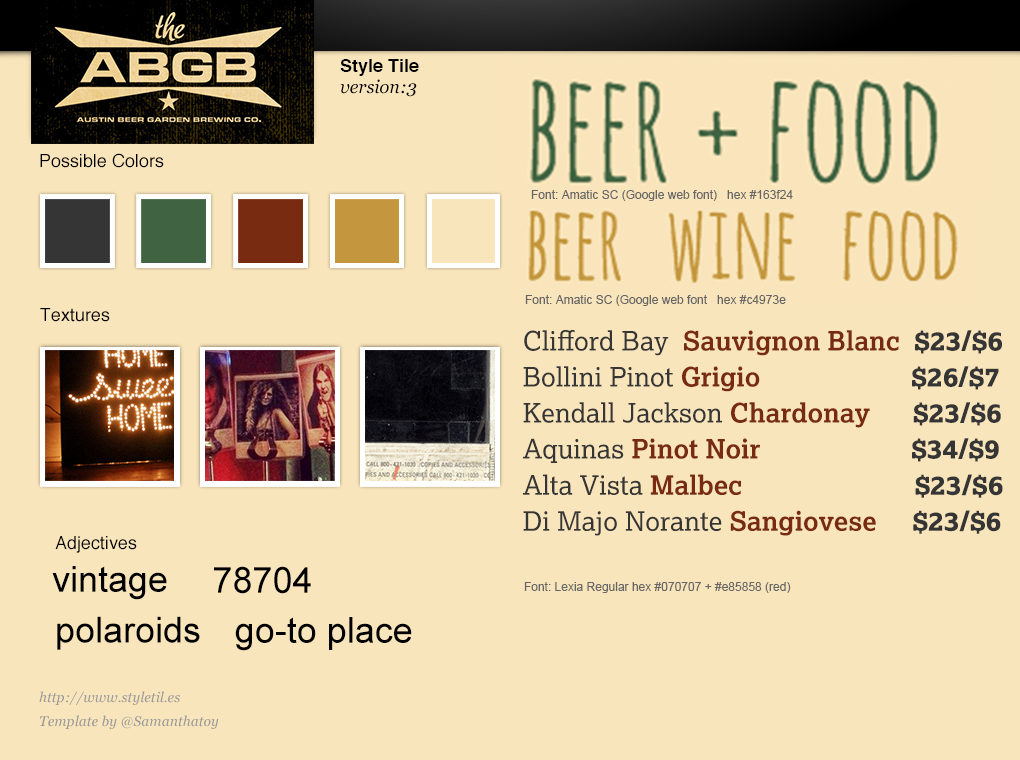
<style>
.page{position:relative;width:1020px;height:760px;background:#f9e5bb}
.page>*{position:absolute;margin:0}
.t1{font:18px "Helvetica-Bold";color:#000000}
.t2{font:18px "Georgia-Italic";color:#000000}
.t3{font:18px "Helvetica";color:#000000}
.t4{font:12px "ArialMT";color:#666666}
.t5{font:26.7px/36px "Lexia-Bold";color:#782b10}
.t6{font:26.7px/36px "Lexia-Regular";color:#363535}
.t7{font:26.7px/36px "Lexia-XBold";color:#363535}
.t8{font:36px "ArialMT";color:#000000}
.t9{font:14px/24px "Georgia-Italic";color:#999999}
</style>
<div class="page">
<p class="t1" style="left:340px;top:59px;width:79px;height:17px">Style Tile</p>
<p class="t2" style="left:340px;top:79px;width:77px;height:18px">version:3</p>
<p class="t3" style="left:40px;top:153px;width:124px;height:15px">Possible Colors</p>
<p class="t4" style="left:531px;top:190px;width:262px;height:11px">Font: Amatic SC (Google web font)   hex #163f24</p>
<p class="t4" style="left:525px;top:295px;width:261px;height:11px">Font: Amatic SC (Google web font   hex #c4973e</p>
<p class="t3" style="left:40px;top:308px;width:70px;height:14px">Textures</p>
<p class="t5" style="left:523px;top:330px;width:480px;height:206px"><span class="t6">Clifford Bay  </span>Sauvignon Blanc  <span class="t7">$23/$6<br></span><span class="t6">Bollini Pinot </span>Grigio                     <span class="t7">$26/$7<br></span><span class="t6">Kendall Jackson </span>Chardonay      <span class="t7">$23/$6<br></span><span class="t6">Aquinas </span>Pinot Noir                     <span class="t7">$34/$9<br></span><span class="t6">Alta Vista </span>Malbec                        <span class="t7">$23/$6<br></span><span class="t6">Di Majo Norante </span>Sangiovese     <span class="t7">$23/$6</span></p>
<p class="t3" style="left:55px;top:536px;width:82px;height:17px">Adjectives</p>
<p class="t8" style="left:52px;top:566px;width:115px;height:34px">vintage</p>
<p class="t8" style="left:214px;top:566px;width:97px;height:28px">78704</p>
<p class="t4" style="left:524px;top:582px;width:267px;height:11px">Font: Lexia Regular hex #070707 + #e85858 (red)</p>
<p class="t8" style="left:57px;top:616px;width:143px;height:34px">polaroids</p>
<p class="t8" style="left:235px;top:617px;width:177px;height:34px">go-to place</p>
<p class="t9" style="left:39px;top:691px;width:180px;height:38px">http://www.styletil.es<br>Template by @Samanthatoy</p>
</div>
